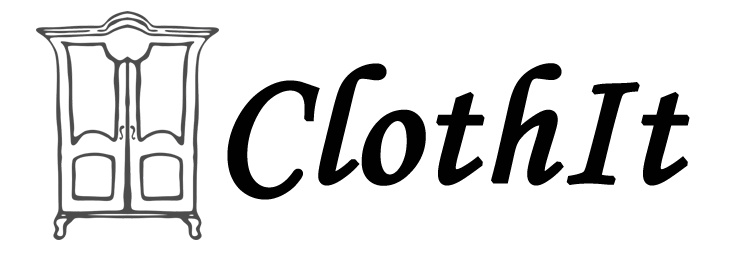
<style>
.page{position:relative;width:744px;height:259px;background:#ffffff}
.page>*{position:absolute;margin:0}
.t1{font:167.3px "MonotypeCorsiva";color:#010101;font-weight:bold}
</style>
<div class="page">
<p class="t1" style="left:227px;top:63px;width:463px;height:137px">ClothIt</p>
</div>
